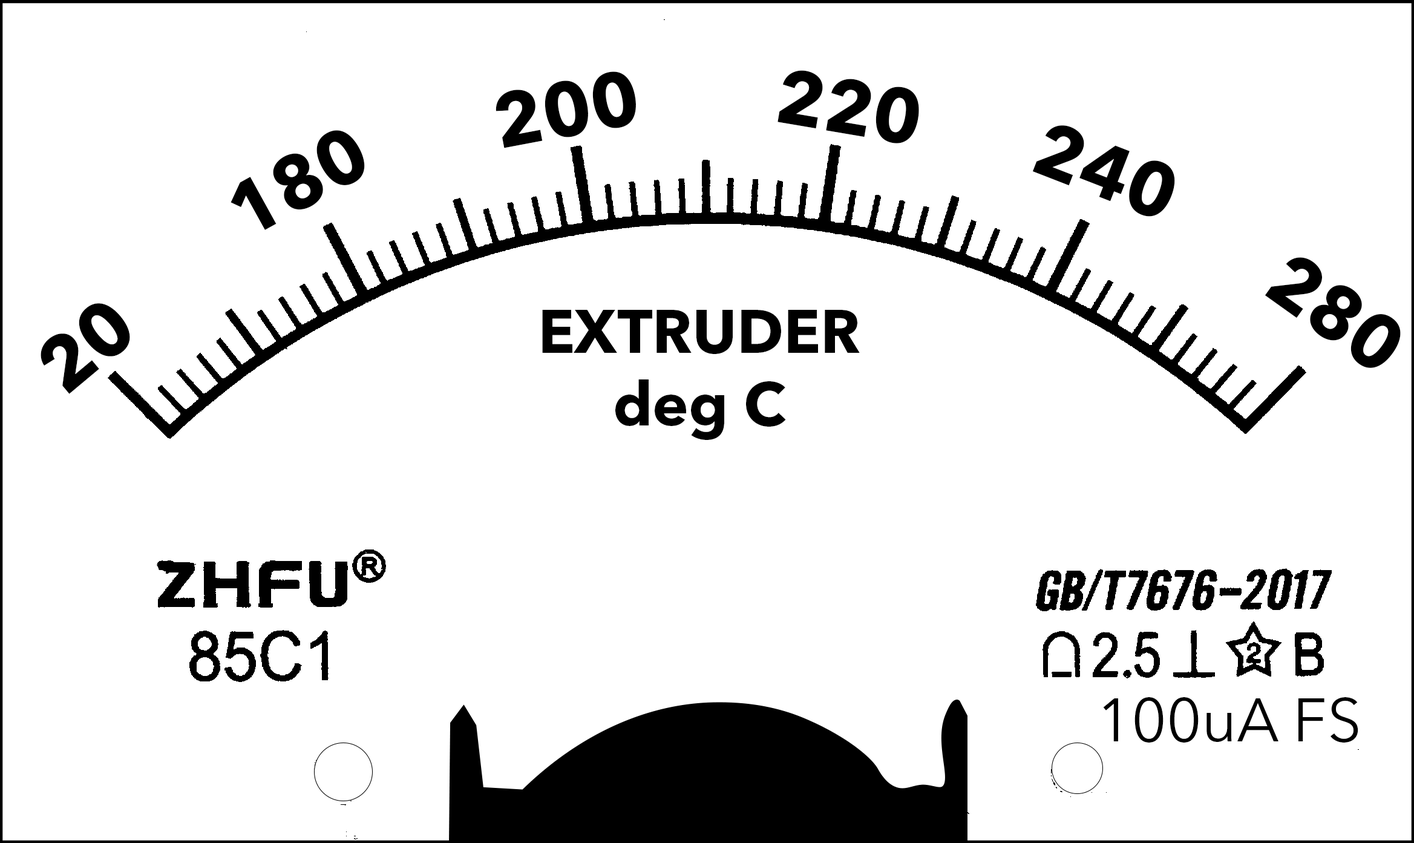
<style>
.page{position:relative;width:1414px;height:843px;background:#ffffff}
.page>*{position:absolute;margin:0}
.t1{font:75.7px "AvenirNextLTPro-Bold";color:#000000}
.t2{font:60.5px "AvenirNextLTPro-Bold";color:#000000}
.t3{font:60.5px "AvenirNextLTPro-Regular";color:#000000}
</style>
<div class="page">
<p class="t1" style="left:496px;top:71px;width:140px;height:77px;rotate:-11deg">200</p>
<p class="t1" style="left:778px;top:70px;width:141px;height:73px;rotate:10deg">220</p>
<p class="t1" style="left:1033px;top:125px;width:142px;height:92px;rotate:21deg">240</p>
<p class="t1" style="left:231px;top:130px;width:134px;height:100px;rotate:-29deg">180</p>
<p class="t1" style="left:1265px;top:257px;width:136px;height:111px;rotate:36deg">280</p>
<p class="t1" style="left:41px;top:303px;width:89px;height:91px;rotate:-40deg">20</p>
<p class="t2" style="left:542px;top:310px;width:318px;height:130px;text-align:center">EXTRUDER<br>deg C</p>
<p class="t3" style="left:1103px;top:697px;width:256px;height:46px">100uA FS</p>
</div>
